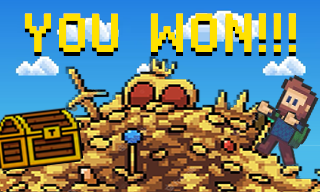
<style>
.page{position:relative;width:320px;height:192px}
.page>*{position:absolute;margin:0}
.t1{font:71px "DisposableDroidBB";color:#ffe100}
</style>
<div class="page">
<p class="t1" style="left:24px;top:17px;width:272px;height:39px">YOU WON!!!</p>
<p class="t1" style="left:24px;top:13px;width:272px;height:39px">YOU WON!!!</p>
</div>
